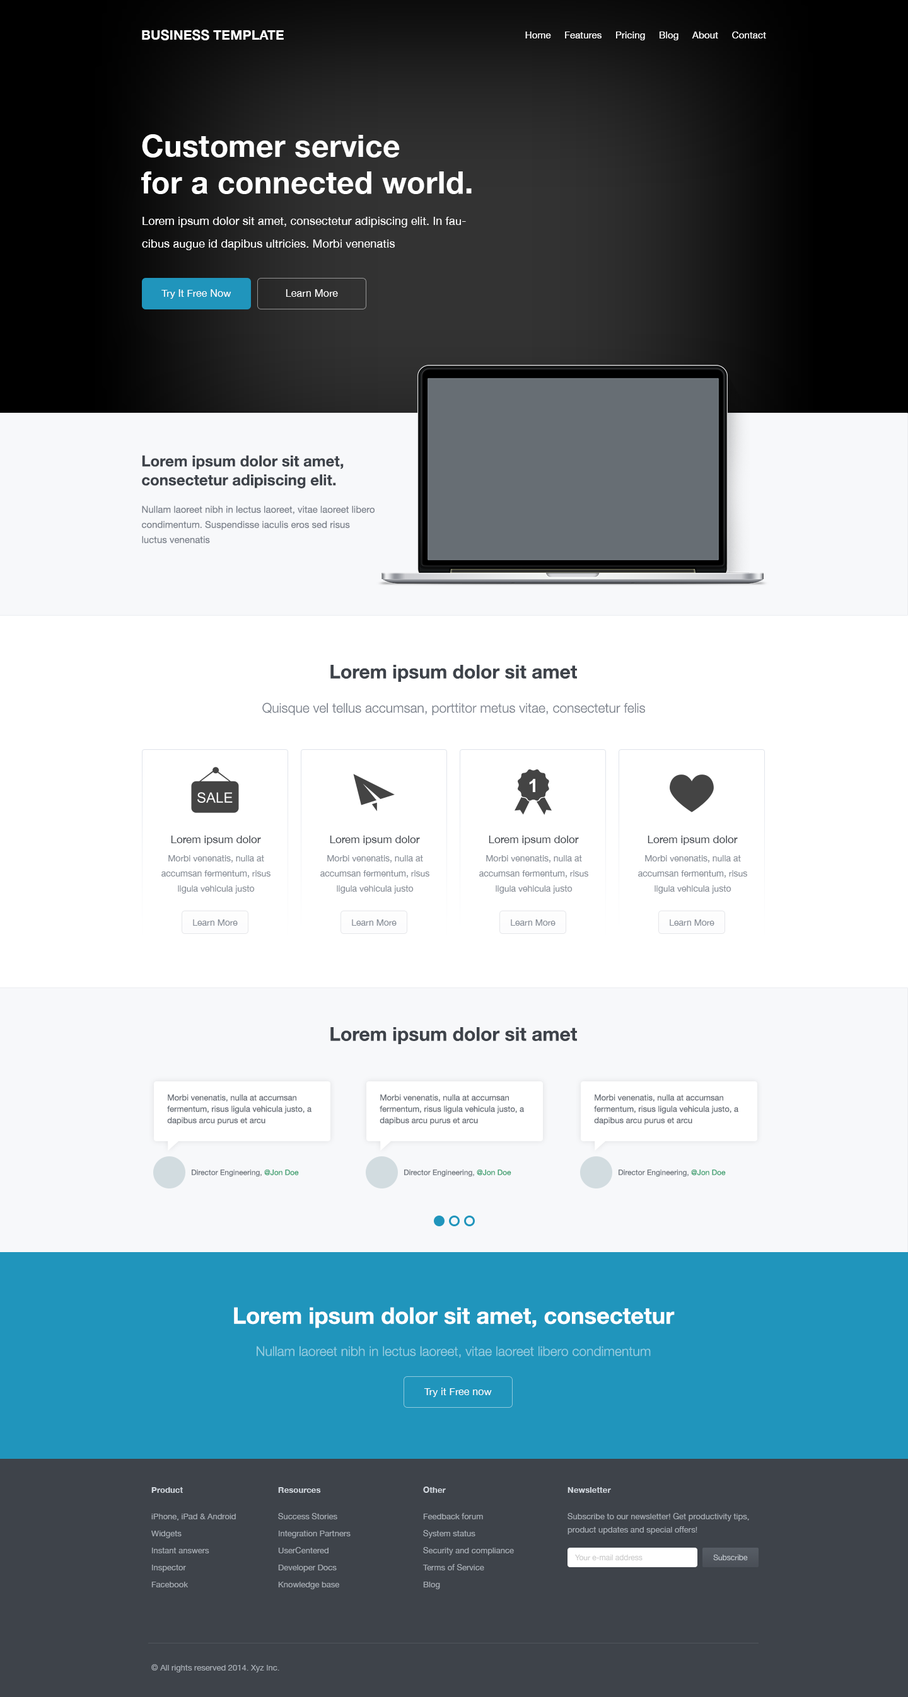
<style>
.page{position:relative;width:908px;height:1697px;background:#ffffff}
.page>*{position:absolute;margin:0}
.t1{font:13.5px "HelveticaNeue-Bold";letter-spacing:0.01em;color:#ffffff}
.t2{font:9.6px "HelveticaNeue";letter-spacing:0.01em;color:#ffffff}
.t3{font:30.9px "HelveticaNeue-Bold";letter-spacing:0.01em;color:#ffffff}
.t4{font:11.6px/22.7px "HelveticaNeue";letter-spacing:0.01em;color:#ffffff}
.t5{font:10.3px "HelveticaNeue";letter-spacing:0.01em;color:#ffffff}
.t6{font:15.1px/18.9px "HelveticaNeue-Bold";color:#3e434a}
.t7{font:9.5px/15.1px "HelveticaNeue";color:#7e848e}
.t8{font:18.9px "HelveticaNeue-Bold";color:#3e434a}
.t9{font:13.2px "HelveticaNeue-Light";color:#7e848e}
.t10{font:10.9px "HelveticaNeue";color:#42474e}
.t11{font:9px/15.1px "HelveticaNeue";color:#898f98}
.t12{font:9px "HelveticaNeue";color:#898f98}
.t13{font:8.2px/11.3px "HelveticaNeue";color:#656b74}
.t14{font:7.6px "HelveticaNeue";color:#6e747c}
.t15{font:7.6px "HelveticaNeue";color:#3ba06f}
.t16{font:22.7px "HelveticaNeue-Bold";color:#ffffff}
.t17{font:13.2px "HelveticaNeue-Light";color:#95cde0}
.t18{font:8.4px "HelveticaNeue-Bold";letter-spacing:0.01em;color:#d0d6dd}
.t19{font:8.4px/17px "HelveticaNeue";color:#a5abb2}
.t20{font:8.4px/13.2px "HelveticaNeue";color:#a5abb2}
.t21{font:7.7px "HelveticaNeue";color:#cbcbcb}
.t22{font:7.7px "HelveticaNeue";color:#bbc1c8}
.t23{font:8.4px "HelveticaNeue";color:#a5abb2}
</style>
<div class="page">
<p class="t1" style="left:142px;top:30px;width:142px;height:10px">BUSINESS TEMPLATE</p>
<p class="t2" style="left:525px;top:32px;width:241px;height:8px">Home     Features     Pricing     Blog     About     Contact</p>
<p class="t3" style="left:141px;top:134px;width:330px;height:60px">Customer service<br>for a connected world.</p>
<p class="t4" style="left:142px;top:217px;width:324px;height:33px">Lorem ipsum dolor sit amet, consectetur adipiscing elit. In faucibus augue id dapibus ultricies. Morbi venenatis</p>
<p class="t5" style="left:161px;top:289px;width:70px;height:10px">Try It Free Now</p>
<p class="t5" style="left:286px;top:289px;width:52px;height:8px">Learn More</p>
<p class="t6" style="left:142px;top:455px;width:201px;height:33px">Lorem ipsum dolor sit amet, consectetur adipiscing elit.</p>
<p class="t7" style="left:142px;top:505px;width:232px;height:38px">Nullam laoreet nibh in lectus laoreet, vitae laoreet libero condimentum. Suspendisse iaculis eros sed risus luctus venenatis</p>
<p class="t8" style="left:330px;top:665px;width:247px;height:17px">Lorem ipsum dolor sit amet</p>
<p class="t9" style="left:262px;top:703px;width:383px;height:12px">Quisque vel tellus accumsan, porttitor metus vitae, consectetur felis</p>
<p class="t10" style="left:171px;top:836px;width:90px;height:9px">Lorem ipsum dolor</p>
<p class="t10" style="left:330px;top:836px;width:90px;height:9px">Lorem ipsum dolor</p>
<p class="t10" style="left:488px;top:836px;width:91px;height:9px">Lorem ipsum dolor</p>
<p class="t10" style="left:647px;top:836px;width:90px;height:9px">Lorem ipsum dolor</p>
<p class="t11" style="left:161px;top:855px;width:109px;height:39px;text-align:center">Morbi venenatis, nulla at accumsan fermentum, risus ligula vehicula justo</p>
<p class="t11" style="left:320px;top:855px;width:109px;height:39px;text-align:center">Morbi venenatis, nulla at accumsan fermentum, risus ligula vehicula justo</p>
<p class="t11" style="left:479px;top:855px;width:109px;height:39px;text-align:center">Morbi venenatis, nulla at accumsan fermentum, risus ligula vehicula justo</p>
<p class="t11" style="left:638px;top:855px;width:109px;height:39px;text-align:center">Morbi venenatis, nulla at accumsan fermentum, risus ligula vehicula justo</p>
<p class="t12" style="left:193px;top:920px;width:45px;height:6px">Learn More</p>
<p class="t12" style="left:352px;top:920px;width:44px;height:6px">Learn More</p>
<p class="t12" style="left:511px;top:920px;width:44px;height:6px">Learn More</p>
<p class="t12" style="left:669px;top:920px;width:45px;height:6px">Learn More</p>
<p class="t8" style="left:330px;top:1027px;width:247px;height:17px">Lorem ipsum dolor sit amet</p>
<p class="t13" style="left:167px;top:1094px;width:144px;height:31px">Morbi venenatis, nulla at accumsan fermentum, risus ligula vehicula justo, a dapibus arcu purus et arcu</p>
<p class="t13" style="left:379px;top:1094px;width:145px;height:31px">Morbi venenatis, nulla at accumsan fermentum, risus ligula vehicula justo, a dapibus arcu purus et arcu</p>
<p class="t13" style="left:594px;top:1094px;width:144px;height:31px">Morbi venenatis, nulla at accumsan fermentum, risus ligula vehicula justo, a dapibus arcu purus et arcu</p>
<p class="t14" style="left:192px;top:1169px;width:107px;height:8px">Director Engineering, <span class="t15">@Jon Doe</span></p>
<p class="t14" style="left:404px;top:1169px;width:107px;height:8px">Director Engineering, <span class="t15">@Jon Doe</span></p>
<p class="t14" style="left:618px;top:1169px;width:107px;height:8px">Director Engineering, <span class="t15">@Jon Doe</span></p>
<p class="t16" style="left:234px;top:1307px;width:440px;height:22px">Lorem ipsum dolor sit amet, consectetur</p>
<p class="t17" style="left:257px;top:1346px;width:393px;height:12px">Nullam laoreet nibh in lectus laoreet, vitae laoreet libero condimentum</p>
<p class="t5" style="left:424px;top:1388px;width:68px;height:9px">Try it Free now</p>
<p class="t18" style="left:151px;top:1487px;width:32px;height:6px">Product</p>
<p class="t18" style="left:278px;top:1487px;width:43px;height:6px">Resources</p>
<p class="t18" style="left:423px;top:1487px;width:23px;height:6px">Other</p>
<p class="t18" style="left:567px;top:1487px;width:44px;height:6px">Newsletter</p>
<p class="t19" style="left:151px;top:1514px;width:85px;height:74px">iPhone, iPad &amp; Android<br>Widgets<br>Instant answers<br>Inspector<br>Facebook</p>
<p class="t19" style="left:278px;top:1513px;width:72px;height:76px">Success Stories<br>Integration Partners<br>UserCentered<br>Developer Docs<br>Knowledge base</p>
<p class="t19" style="left:422px;top:1513px;width:92px;height:76px">Feedback forum<br>System status<br>Security and compliance<br>Terms of Service<br>Blog</p>
<p class="t20" style="left:567px;top:1513px;width:182px;height:22px">Subscribe to our newsletter! Get productivity tips, <br>product updates and special offers!</p>
<p class="t21" style="left:574px;top:1555px;width:68px;height:6px">Your e-mail address</p>
<p class="t22" style="left:713px;top:1555px;width:34px;height:6px">Subscribe</p>
<p class="t23" style="left:151px;top:1664px;width:128px;height:9px">© All rights reserved 2014. Xyz Inc.</p>
</div>
